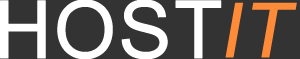
<style>
.page{position:relative;width:300px;height:59px;background:#333333}
.page>*{position:absolute;margin:0}
.t1{font:80px "ArialMT";color:#ffffff;text-transform:uppercase;font-weight:bold}
.t2{font:84px "Vrinda";color:#ff8b38;font-weight:bold;font-style:italic}
</style>
<div class="page">
<p class="t1" style="left:0px;top:0px;width:222px;height:60px">HOST</p>
<p class="t2" style="left:225px;top:2px;width:72px;height:56px">IT</p>
</div>
